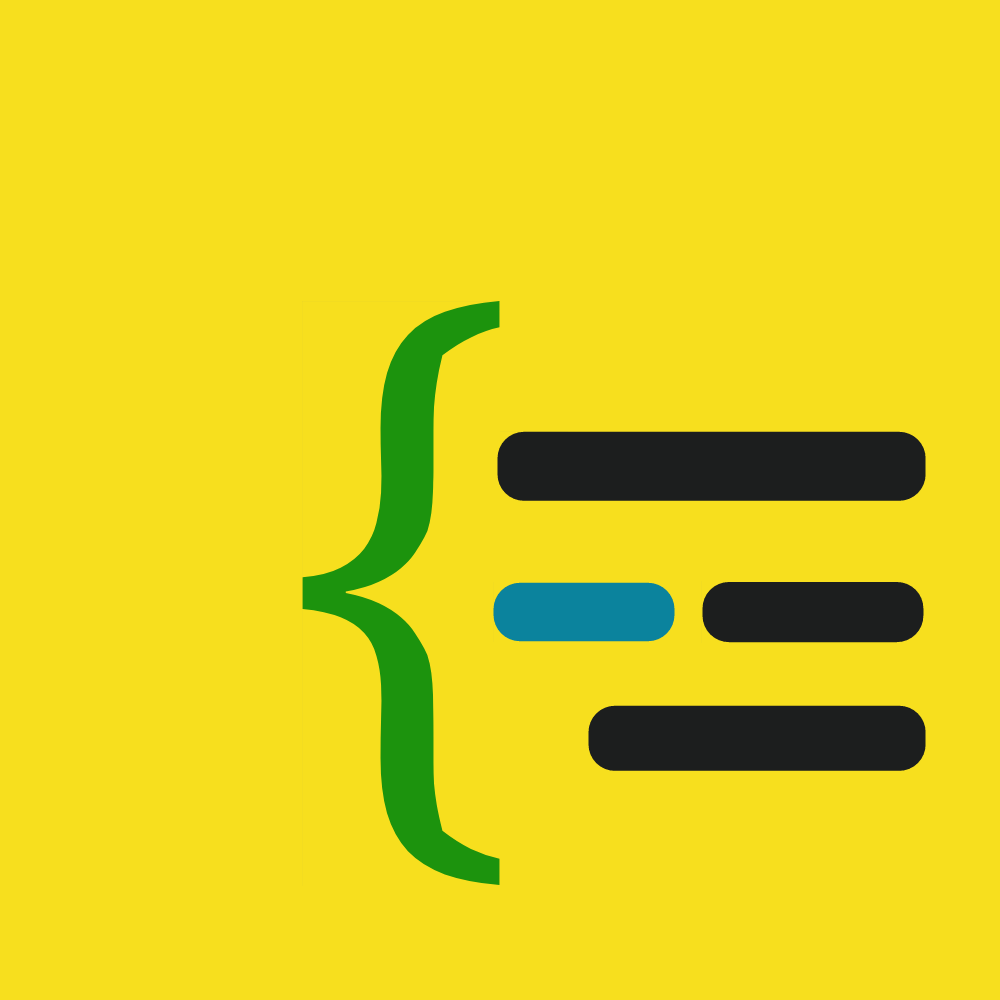
<style>
.page{position:relative;width:1000px;height:1000px;background:#f7df1e}
.page>*{position:absolute;margin:0}
.t1{font:556.1px "DonegalOne-Regular";color:#1c930d}
</style>
<div class="page">
<p class="t1" style="left:302px;top:301px;width:198px;height:585px">{</p>
</div>
